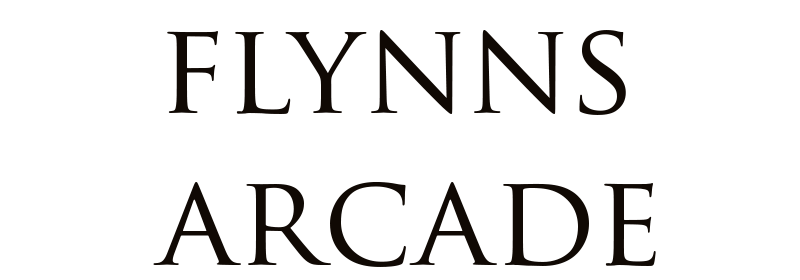
<style>
.page{position:relative;width:800px;height:280px;background:#ffffff}
.page>*{position:absolute;margin:0}
.t1{font:127px "TrajanPro-Regular";color:#100a05}
</style>
<div class="page">
<p class="t1" style="left:153px;top:30px;width:503px;height:237px">flynns<br>arcade</p>
</div>
